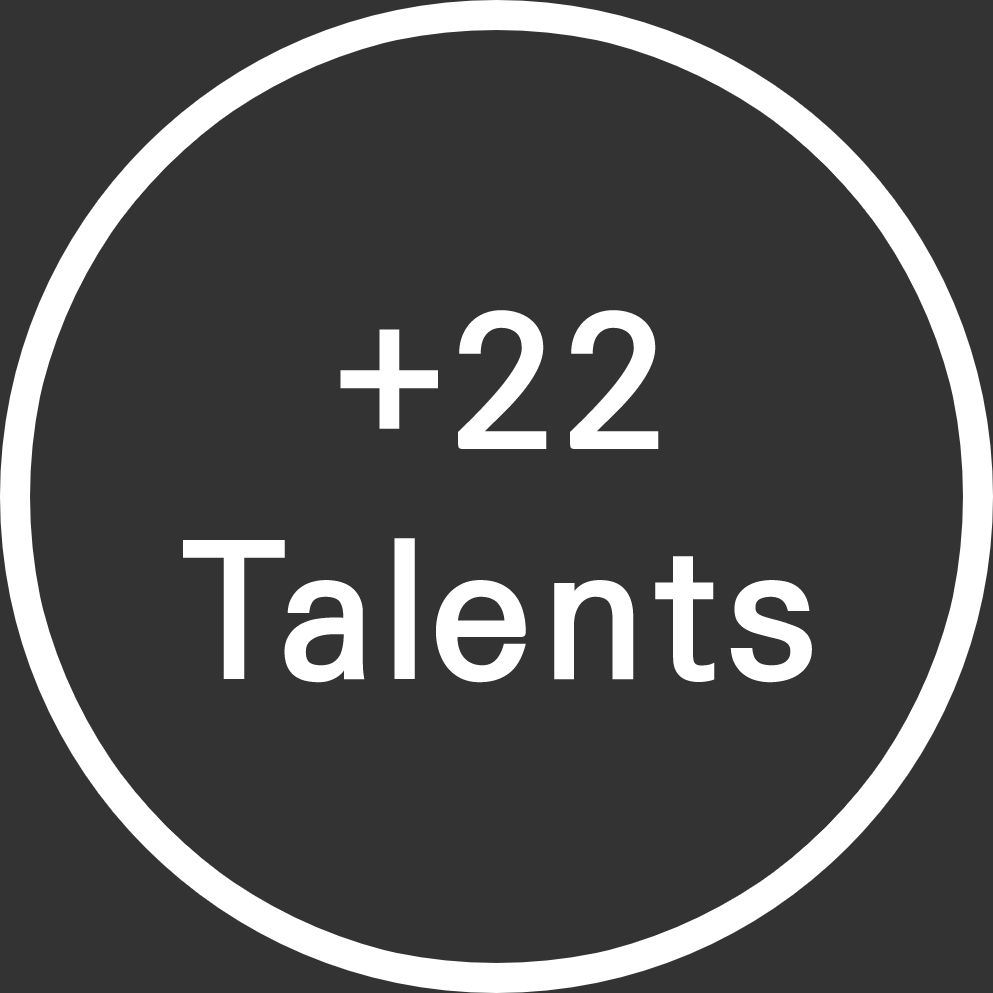
<style>
.page{position:relative;width:993px;height:993px;background:#333333}
.page>*{position:absolute;margin:0}
.t1{font:183.3px/229.2px "KoPubWorldDotumBold";letter-spacing:0.05em;color:#ffffff}
</style>
<div class="page">
<p class="t1" style="left:183px;top:310px;width:629px;height:373px;text-align:center">+22<br>Talents</p>
</div>
